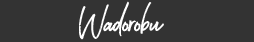
<style>
.page{position:relative;width:254px;height:42px;background:#333333}
.page>*{position:absolute;margin:0}
.t1{font:35.8px "BrownhillScript";color:#ffffff}
</style>
<div class="page">
<p class="t1" style="left:79px;top:1px;width:85px;height:39px">Wadorobu</p>
</div>
